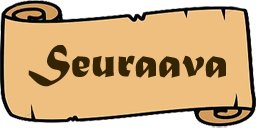
<style>
.page{position:relative;width:256px;height:128px;background:#efbf7f}
.page>*{position:absolute;margin:0}
.t1{font:48px "MaturaMTScriptCapitals";color:#352401}
</style>
<div class="page">
<p class="t1" style="left:28px;top:45px;width:198px;height:42px">Seuraava</p>
</div>
